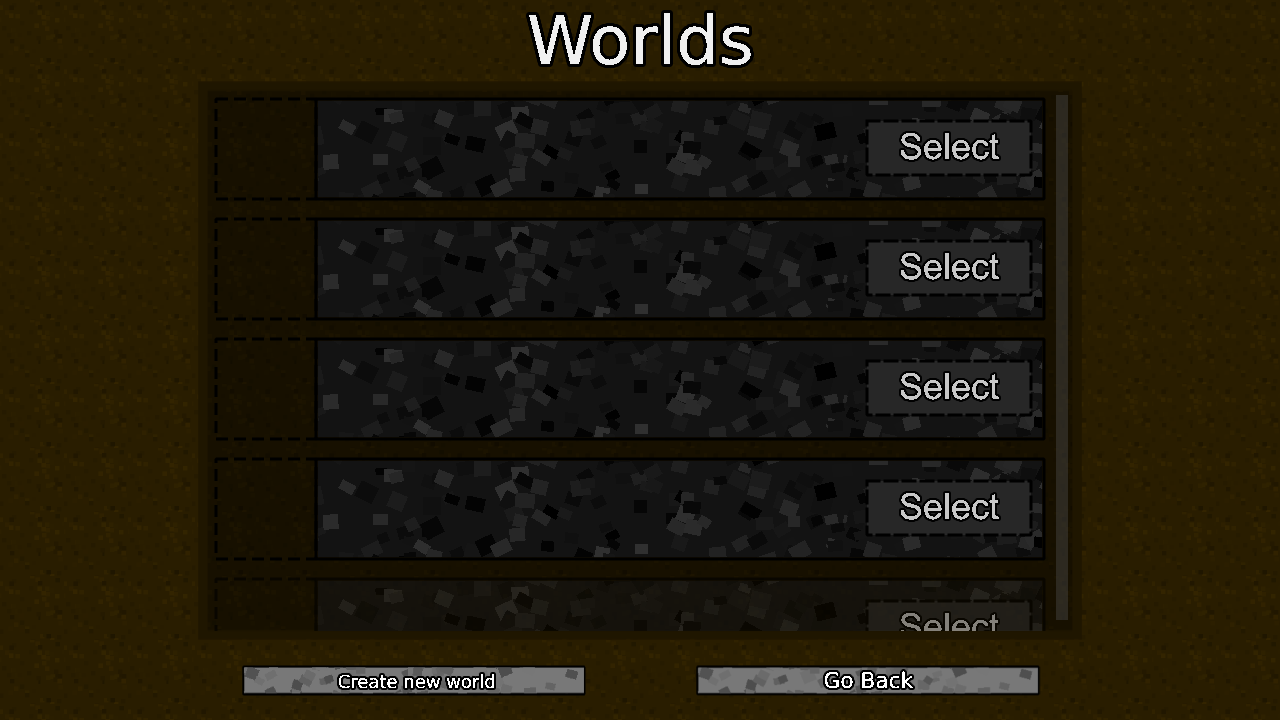
<style>
.page{position:relative;width:1280px;height:720px;background:#291d00}
.page>*{position:absolute;margin:0}
.t1{font:67px "ArialMTBlack";color:#f0f0f0}
.t2{font:18px "ArialMTBlack";color:#ffffff}
.t3{font:21.7px "ArialMTBlack";color:#ffffff}
</style>
<div class="page">
<p class="t1" style="left:529px;top:13px;width:222px;height:52px">Worlds</p>
<p class="t2" style="left:338px;top:674px;width:157px;height:15px">Create new world</p>
<p class="t3" style="left:824px;top:671px;width:90px;height:18px">Go Back</p>
</div>
